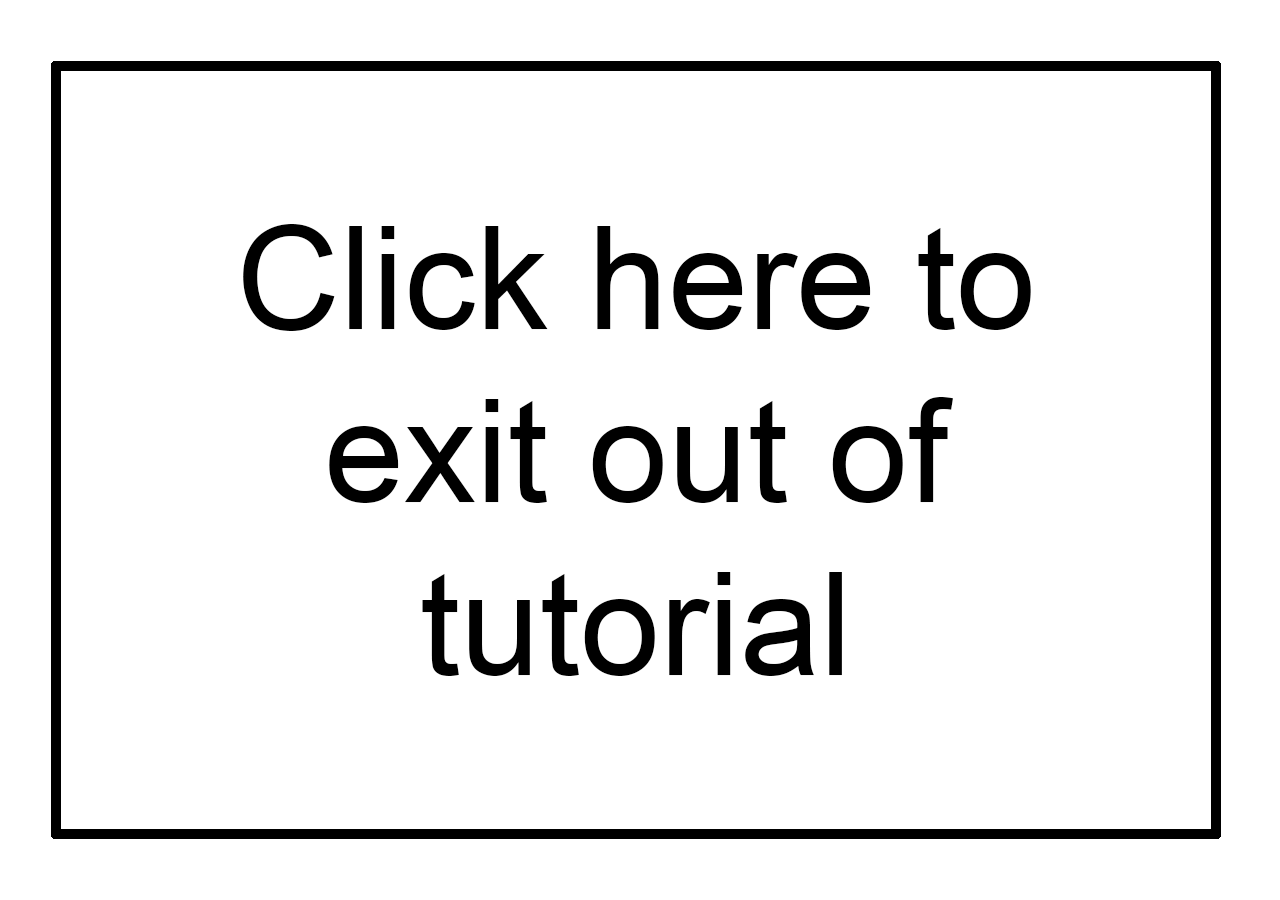
<style>
.page{position:relative;width:1280px;height:900px;background:#ffffff}
.page>*{position:absolute;margin:0}
.t1{font:144px "ArialMT";color:#000000}
</style>
<div class="page">
<p class="t1" style="left:243px;top:224px;width:788px;height:452px;text-align:center">Click here to<br>exit out of<br>tutorial</p>
</div>
